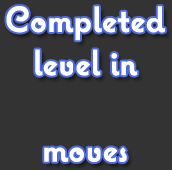
<style>
.page{position:relative;width:172px;height:170px;background:#333333}
.page>*{position:absolute;margin:0}
.t1{font:36px "CoquetteBold";color:#ffffff}
</style>
<div class="page">
<p class="t1" style="left:6px;top:6px;width:159px;height:156px;text-align:center">Completed<br>level in<br><br>moves</p>
</div>
